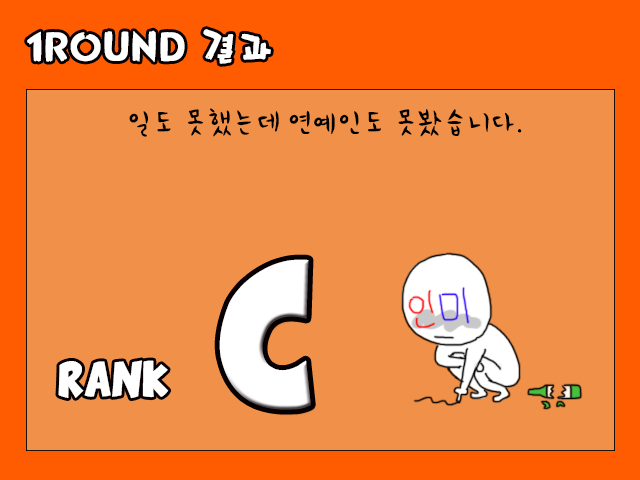
<style>
.page{position:relative;width:640px;height:480px;background:#f19149}
.page>*{position:absolute;margin:0}
.t1{font:36px "Mpop";color:#ffffff}
.t2{font:30px "PNHCartoon";color:#000000}
.t3{font:100px "ComixLoud";color:#ffffff}
.t4{font:24px "ComixLoud";color:#ffffff}
</style>
<div class="page">
<p class="t1" style="left:27px;top:29px;width:244px;height:35px">1ROUND 결과</p>
<p class="t2" style="left:129px;top:108px;width:393px;height:29px">일도 못했는데 연예인도 못봤습니다.</p>
<p class="t3" style="left:219px;top:259px;width:92px;height:151px">C</p>
<p class="t4" style="left:58px;top:360px;width:111px;height:39px">RANK</p>
</div>
